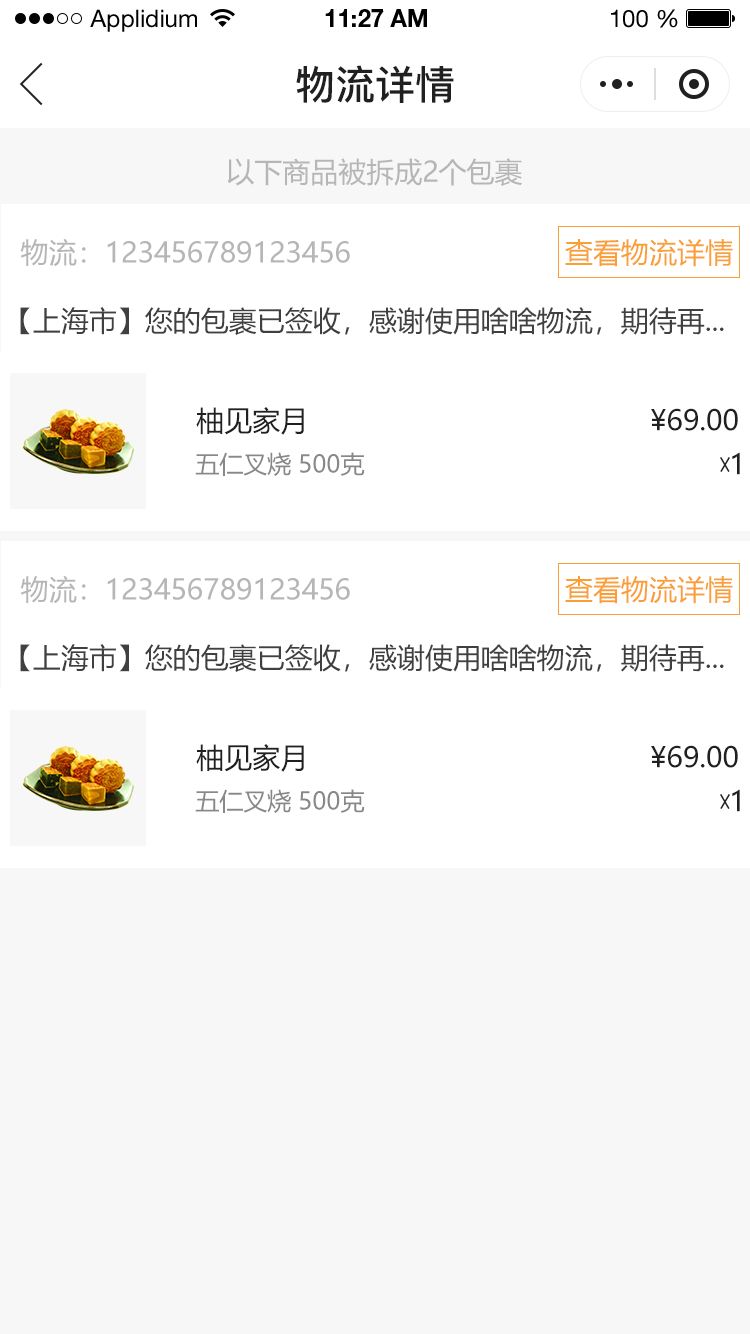
<style>
.page{position:relative;width:750px;height:1334px;background:#ffffff}
.page>*{position:absolute;margin:0}
.t1{font:24px "HelveticaNeueLTStd-Roman";color:#000000}
.t2{font:24px "HelveticaNeueLTStd-Bd";color:#000000}
.t3{font:40px "PingFang-SC-Bold";color:#202020;text-transform:uppercase}
.t4{font:28px "MicrosoftYaHei";color:#b6b6b6}
.t5{font:28px "MicrosoftYaHei";color:#f99f36}
.t6{font:28px "MicrosoftYaHei";color:#404040}
.t7{font:28px "MicrosoftYaHei";color:#202020;text-transform:uppercase}
.t8{font:24px "MicrosoftYaHei";color:#888888;text-transform:uppercase}
</style>
<div class="page">
<p class="t1" style="left:90px;top:9px;width:107px;height:23px">Applidium</p>
<p class="t2" style="left:325px;top:9px;width:102px;height:18px">11:27 AM</p>
<p class="t1" style="left:611px;top:9px;width:67px;height:19px">100 %</p>
<p class="t3" style="left:296px;top:65px;width:158px;height:38px">物流详情</p>
<p class="t4" style="left:227px;top:158px;width:295px;height:28px">以下商品被拆成2个包裹</p>
<p class="t4" style="left:20px;top:238px;width:330px;height:29px">物流：123456789123456</p>
<p class="t5" style="left:565px;top:238px;width:168px;height:29px">查看物流详情</p>
<p class="t6" style="left:20px;top:307px;width:704px;height:28px">【上海市】您的包裹已签收，感谢使用啥啥物流，期待再...</p>
<p class="t7" style="left:196px;top:407px;width:108px;height:28px">柚见家月</p>
<p class="t7" style="left:651px;top:408px;width:87px;height:23px">¥69.00</p>
<p class="t8" style="left:195px;top:452px;width:170px;height:24px">五仁叉烧 500克</p>
<p class="t7" style="left:732px;top:452px;width:8px;height:23px">1</p>
<p class="t4" style="left:20px;top:575px;width:330px;height:29px">物流：123456789123456</p>
<p class="t5" style="left:565px;top:575px;width:168px;height:29px">查看物流详情</p>
<p class="t6" style="left:20px;top:644px;width:704px;height:28px">【上海市】您的包裹已签收，感谢使用啥啥物流，期待再...</p>
<p class="t7" style="left:196px;top:744px;width:108px;height:28px">柚见家月</p>
<p class="t7" style="left:651px;top:745px;width:87px;height:23px">¥69.00</p>
<p class="t8" style="left:195px;top:789px;width:170px;height:24px">五仁叉烧 500克</p>
<p class="t7" style="left:732px;top:789px;width:8px;height:23px">1</p>
</div>
